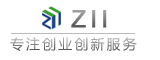
<style>
.page{position:relative;width:160px;height:60px;background:#ffffff}
.page>*{position:absolute;margin:0}
.t1{font:24px "ArialMT";letter-spacing:0.15em;font-weight:bold}
.t2{font:14px "MicrosoftYaHei";letter-spacing:0.15em}
</style>
<div class="page">
<p class="t1" style="left:71px;top:10px;width:36px;height:18px">ZII</p>
<p class="t2" style="left:10px;top:37px;width:127px;height:14px">专注创业创新服务</p>
</div>
